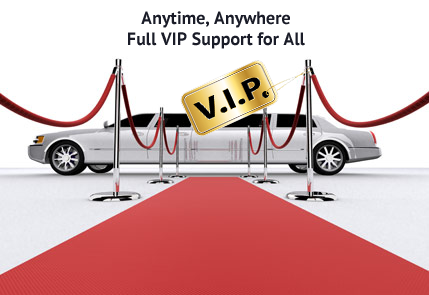
<style>
.page{position:relative;width:429px;height:295px;background:#ffffff}
.page>*{position:absolute;margin:0}
.t1{font:18px/21.2px "PTSans-Bold";color:#1a1c28}
</style>
<div class="page">
<p class="t1" style="left:128px;top:11px;width:177px;height:38px;text-align:center">Anytime, Anywhere<br>Full VIP Support for All</p>
</div>
